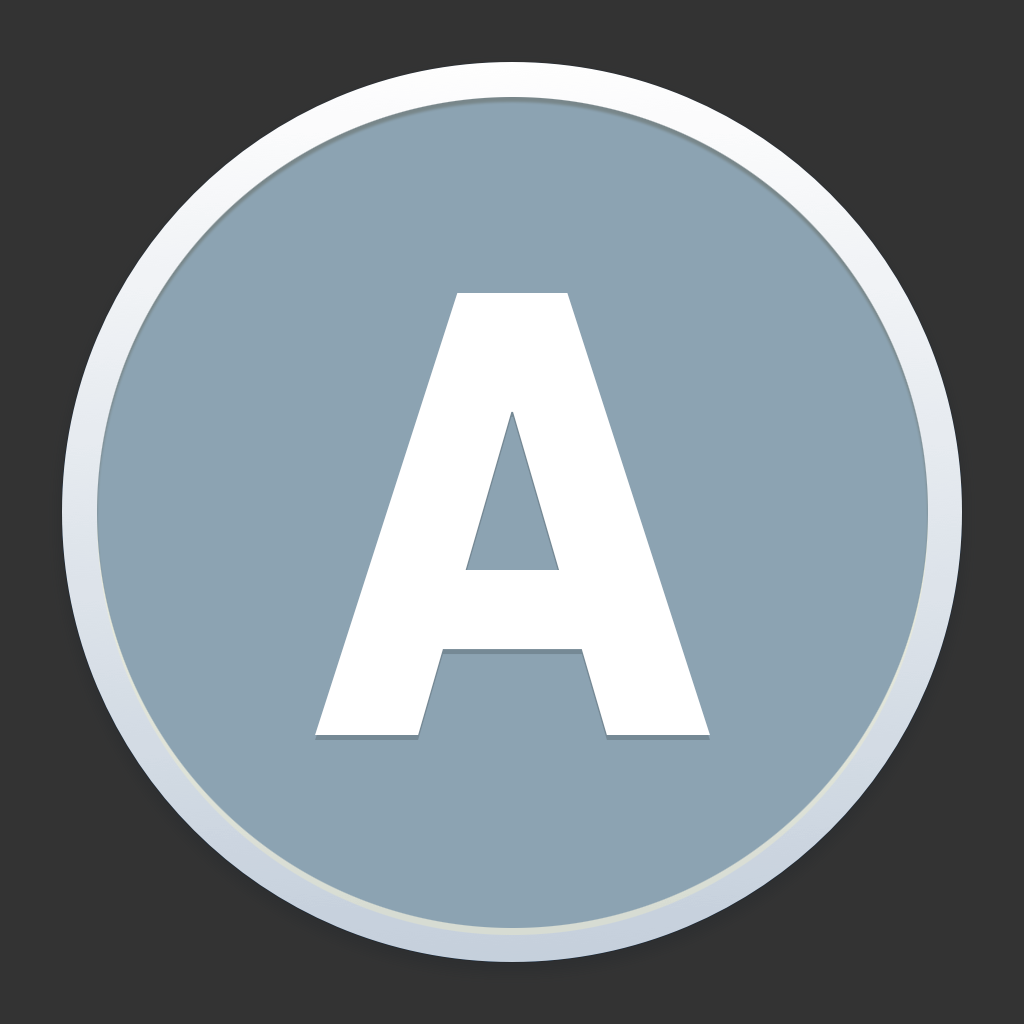
<style>
.page{position:relative;width:1024px;height:1024px;background:#8ca3b2}
.page>*{position:absolute;margin:0}
.t1{font:620.5px "Roboto-Black";color:#ffffff}
</style>
<div class="page">
<p class="t1" style="left:315px;top:293px;width:395px;height:442px">A</p>
</div>
